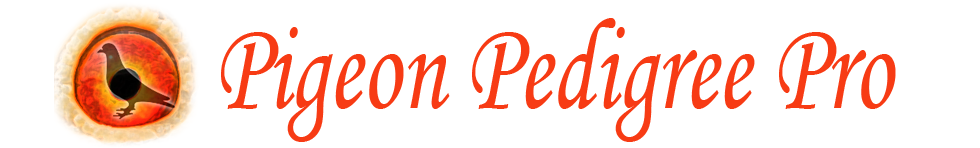
<style>
.page{position:relative;width:980px;height:148px;background:#ffffff}
.page>*{position:absolute;margin:0}
.t1{font:130.9px "MonotypeCorsiva";color:#f73b14;scale:0.74 1}
</style>
<div class="page">
<p class="t1" style="left:221px;top:18px;width:675px;height:124px">Pigeon Pedigree Pro</p>
</div>
